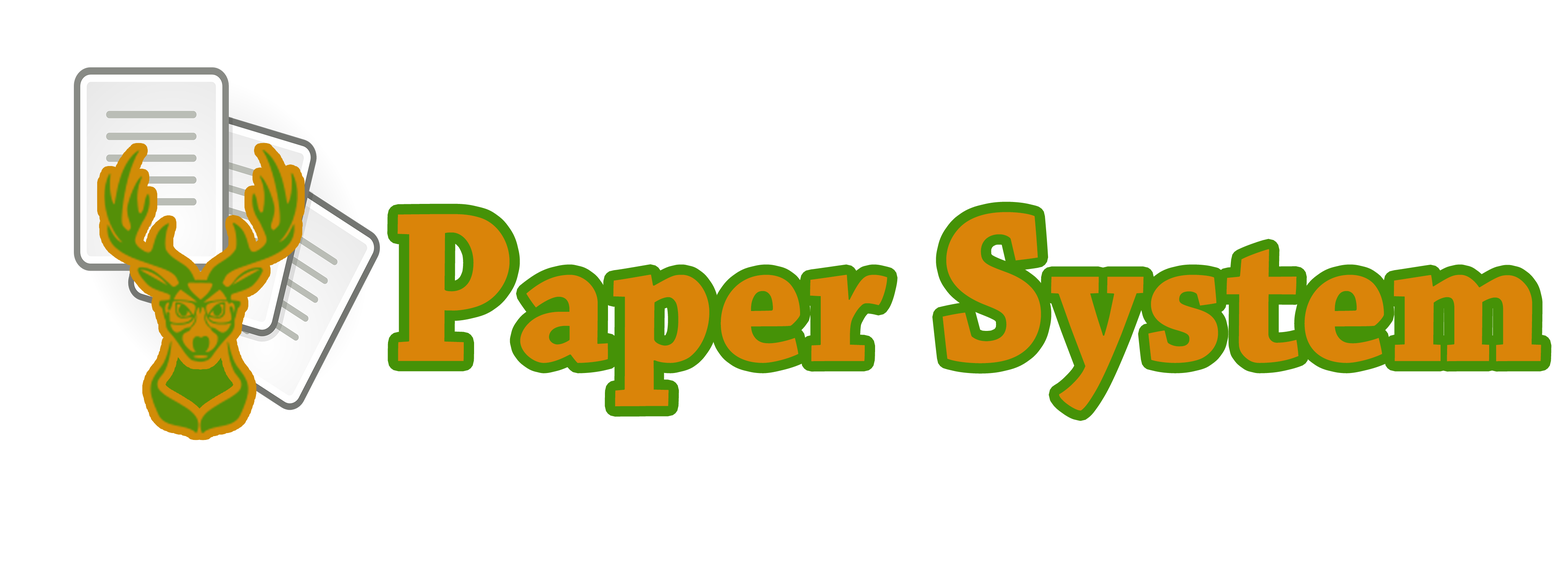
<style>
.page{position:relative;width:1568px;height:583px;background:#ffffff}
.page>*{position:absolute;margin:0}
.t1{font:191.3px "ChaparralPro-Bold";color:#da8409;scale:0.94 1}
.t2{font:225.6px "ChaparralPro-Bold";color:#da8409;scale:0.94 1}
</style>
<div class="page">
<p class="t1" style="left:398px;top:212px;width:1143px;height:199px"><span class="t2">P</span>aper<span class="t2"> S</span>ystem</p>
</div>
